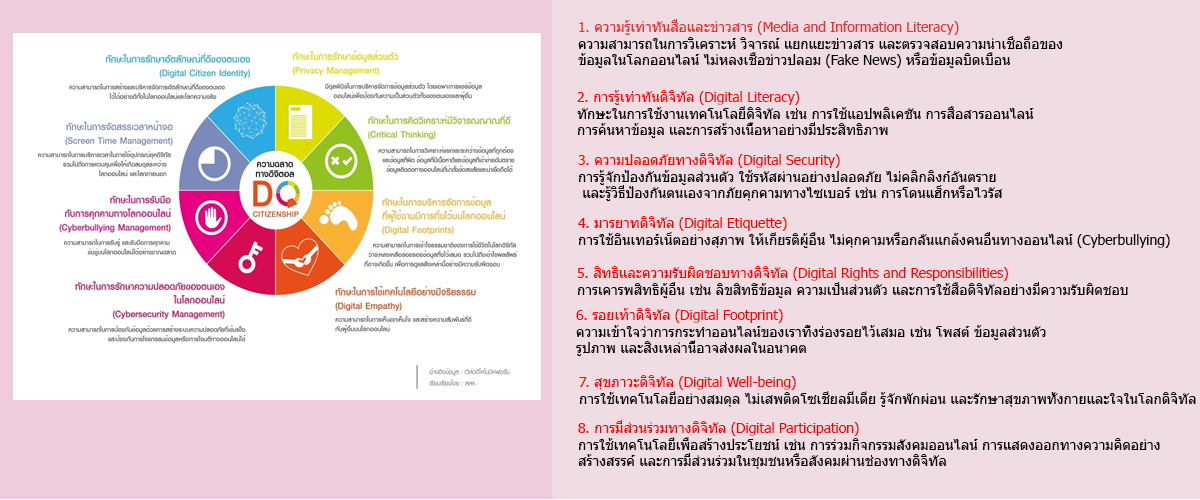
<style>
.page{position:relative;width:1200px;height:500px;background:#f0dce3}
.page>*{position:absolute;margin:0}
.t1{font:13.9px "Tahoma";color:#000000}
.t2{font:13.9px "Tahoma";color:#eb2e2e}
.t3{font:13.9px "Tahoma";color:#f90909}
.t4{font:13.9px "Tahoma";color:#ff0000}
.t5{font:13.9px "Tahoma";color:#fe0000}
</style>
<div class="page">
<p class="t1" style="left:578px;top:19px;width:485px;height:49px"><span class="t2">1. ความรู้เท่าทันสื่อและข่าวสาร (Media and Information Literacy)<br></span>ความสามารถในการวิเคราะห์ วิจารณ์ แยกแยะข่าวสาร และตรวจสอบความน่าเชื่อถือของ<br>ข้อมูลในโลกออนไลน์ ไม่หลงเชื่อข่าวปลอม (Fake News) หรือข้อมูลบิดเบือน</p>
<p class="t1" style="left:577px;top:90px;width:457px;height:48px"><span class="t3">2. การรู้เท่าทันดิจิทัล (Digital Literacy)<br></span>ทักษะในการใช้งานเทคโนโลยีดิจิทัล เช่น การใช้แอปพลิเคชัน การสื่อสารออนไลน์ <br>การค้นหาข้อมูล และการสร้างเนื้อหาอย่างมีประสิทธิภาพ</p>
<p class="t1" style="left:578px;top:153px;width:425px;height:48px"><span class="t4">3. ความปลอดภัยทางดิจิทัล (Digital Security)<br></span>การรู้จักป้องกันข้อมูลส่วนตัว ใช้รหัสผ่านอย่างปลอดภัย ไม่คลิกลิงก์อันตราย<br> และรู้วิธีป้องกันตนเองจากภัยคุกคามทางไซเบอร์ เช่น การโดนแฮ็กหรือไวรัส</p>
<p class="t1" style="left:578px;top:216px;width:592px;height:32px"><span class="t5">4. มารยาทดิจิทัล (Digital Etiquette)<br></span>การใช้อินเทอร์เน็ตอย่างสุภาพ ให้เกียรติผู้อื่น ไม่คุกคามหรือกลั่นแกล้งคนอื่นทางออนไลน์ (Cyberbullying)</p>
<p class="t1" style="left:577px;top:266px;width:551px;height:32px"><span class="t4">5. สิทธิและความรับผิดชอบทางดิจิทัล (Digital Rights and Responsibilities)<br></span>การเคารพสิทธิผู้อื่น เช่น ลิขสิทธิ์ข้อมูล ความเป็นส่วนตัว และการใช้สื่อดิจิทัลอย่างมีความรับผิดชอบ</p>
<p class="t1" style="left:576px;top:308px;width:470px;height:48px"><span class="t4">6. รอยเท้าดิจิทัล (Digital Footprint)<br></span>ความเข้าใจว่าการกระทำออนไลน์ของเราทิ้งร่องรอยไว้เสมอ เช่น โพสต์ ข้อมูลส่วนตัว <br>รูปภาพ และสิ่งเหล่านี้อาจส่งผลในอนาคต</p>
<p class="t1" style="left:579px;top:375px;width:617px;height:32px"><span class="t4">7. สุขภาวะดิจิทัล (Digital Well-being)<br></span>การใช้เทคโนโลยีอย่างสมดุล ไม่เสพติดโซเชียลมีเดีย รู้จักพักผ่อน และรักษาสุขภาพทั้งกายและใจในโลกดิจิทัล</p>
<p class="t1" style="left:578px;top:420px;width:582px;height:49px"><span class="t4">8. การมีส่วนร่วมทางดิจิทัล (Digital Participation)<br></span>การใช้เทคโนโลยีเพื่อสร้างประโยชน์ เช่น การร่วมกิจกรรมสังคมออนไลน์ การแสดงออกทางความคิดอย่าง<br>สร้างสรรค์ และการมีส่วนร่วมในชุมชนหรือสังคมผ่านช่องทางดิจิทัล</p>
</div>
